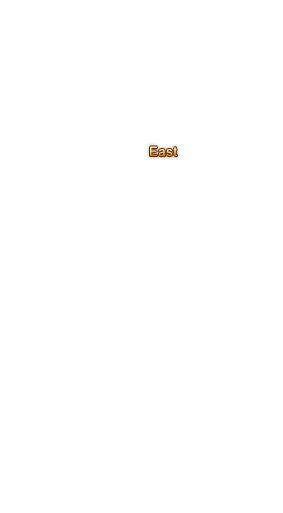
<style>
.page{position:relative;width:283px;height:513px;background:#ffffff}
.page>*{position:absolute;margin:0}
.t1{font:13px "ArialMT";letter-spacing:0.05em}
</style>
<div class="page">
<p class="t1" style="left:150px;top:146px;width:27px;height:11px">East</p>
</div>
